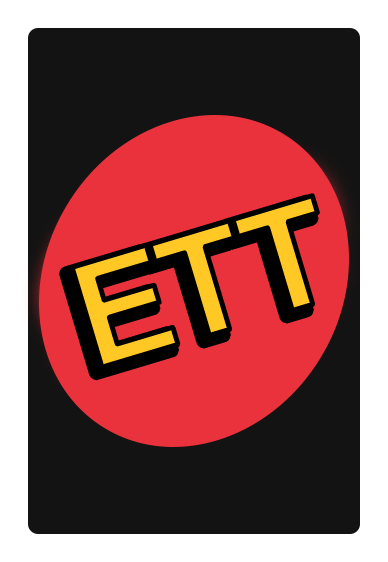
<style>
.page{position:relative;width:388px;height:562px;background:#131313}
.page>*{position:absolute;margin:0}
.t1{font:145.2px "Arial-BoldMT";letter-spacing:-0.01em;color:#ffc825}
.t2{font:145.2px "Arial-BoldMT";letter-spacing:-0.06em;color:#ffc825}
</style>
<div class="page">
<p class="t1" style="left:72px;top:195px;width:246px;height:172px;rotate:-17deg"><span class="t2">E</span>TT</p>
</div>
